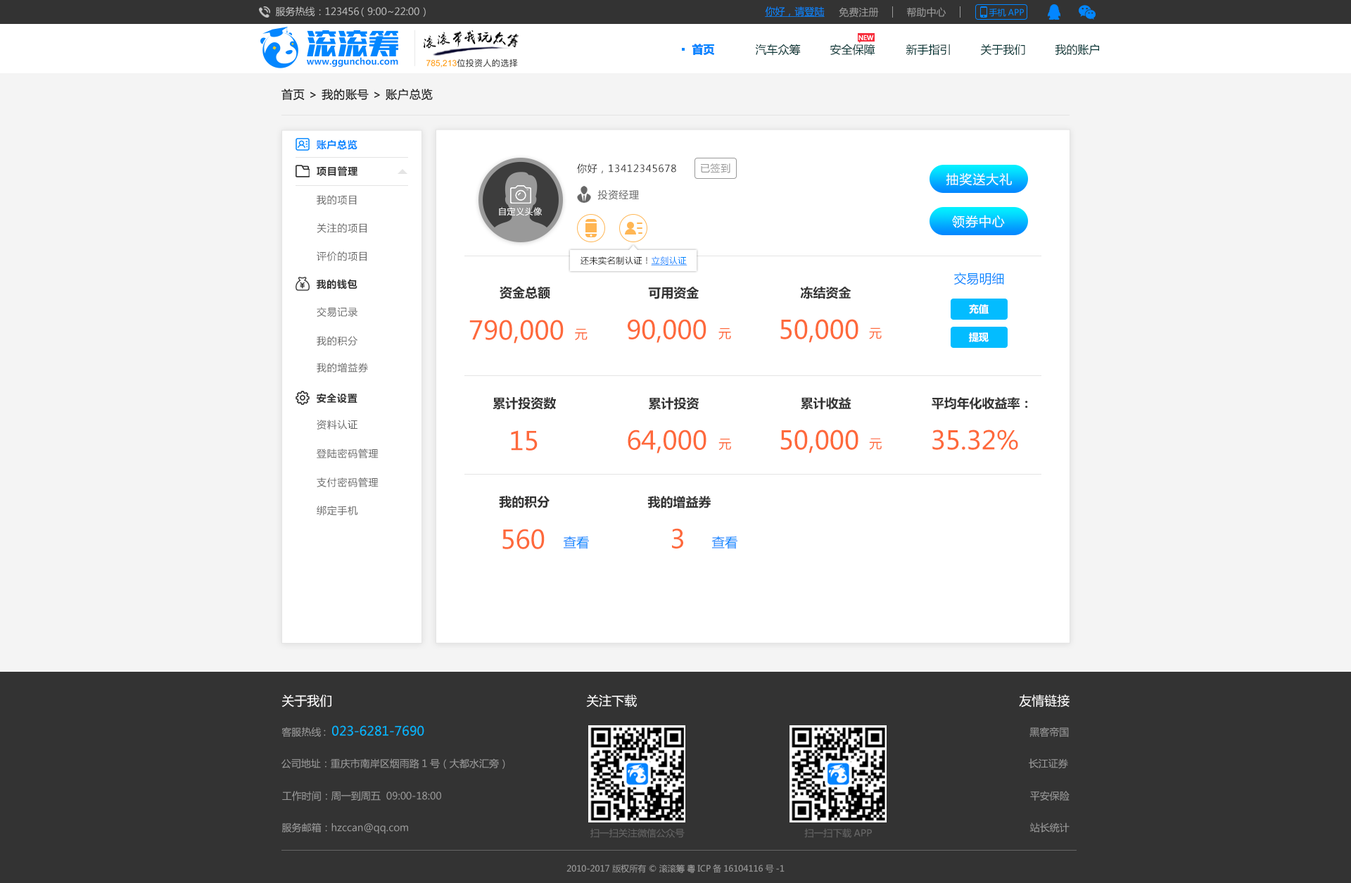
<style>
.page{position:relative;width:1351px;height:883px;background:#ffffff}
.page>*{position:absolute;margin:0}
.t1{font:9.9px "MicrosoftYaHei";color:#c4c4c4}
.t2{font:9.9px "MicrosoftYaHei";color:#0386ff;text-decoration:underline}
.t3{font:9.9px "MicrosoftYaHei";color:#999999}
.t4{font:8.4px "MicrosoftYaHei";color:#0386ff}
.t5{font:6.3px "MicrosoftYaHei";color:#ffffff}
.t6{font:11.3px "MicrosoftYaHei-Bold";color:#0386ff}
.t7{font:11.3px "MicrosoftYaHei";color:#033333}
.t8{font:8.8px "MicrosoftYaHei-Bold";color:#0386ff}
.t9{font:11.3px "MicrosoftYaHei";letter-spacing:0.05em;color:#333333}
.t10{font:9.9px "MicrosoftYaHei-Bold";letter-spacing:0.05em;color:#0386ff}
.t11{font:9.9px "MicrosoftYaHei-Bold";letter-spacing:0.05em;color:#333333}
.t12{font:9.9px "MicrosoftYaHei";letter-spacing:0.05em;color:#333333}
.t13{font:9.9px "MicrosoftYaHei";letter-spacing:0.05em;color:#999999}
.t14{font:12.7px "MicrosoftYaHei";letter-spacing:0.05em;color:#ffffff}
.t15{font:9.9px "MicrosoftYaHei";letter-spacing:0.05em;color:#666666}
.t16{font:8.4px "MicrosoftYaHei";letter-spacing:0.05em;color:#ffffff}
.t17{font:8.4px "MicrosoftYaHei";letter-spacing:0.05em;color:#222222}
.t18{font:8.4px "MicrosoftYaHei";letter-spacing:0.05em;color:#0386ff;text-decoration:underline}
.t19{font:12.6px "MicrosoftYaHei";color:#0386ff}
.t20{font:12.6px "MicrosoftYaHei-Bold";color:#333333}
.t21{font:9.9px "MicrosoftYaHei-Bold";color:#ffffff}
.t22{font:25.3px "MicrosoftYaHei";color:#fe693b}
.t23{font:12.6px "MicrosoftYaHei";color:#fe693b}
.t24{font:13.1px "MicrosoftYaHei";color:#0386ff}
.t25{font:12.7px "MicrosoftYaHei";color:#fffefe}
.t26{font:12.7px "MicrosoftYaHei";color:#03b6ff}
.t27{font:9.4px "MicrosoftYaHei";color:#666666}
.t28{font:8.4px "MicrosoftYaHei";color:#999999}
</style>
<div class="page">
<p class="t1" style="left:275px;top:6px;width:151px;height:11px">服务热线：123456 （9:00~22:00）</p>
<p class="t2" style="left:765px;top:6px;width:60px;height:11px">你好，请登陆</p>
<p class="t3" style="left:839px;top:7px;width:40px;height:11px">免费注册</p>
<p class="t3" style="left:907px;top:7px;width:40px;height:11px">帮助中心</p>
<p class="t4" style="left:989px;top:8px;width:35px;height:9px">手机APP</p>
<p class="t5" style="left:859px;top:34px;width:15px;height:6px">NEW</p>
<p class="t6" style="left:692px;top:44px;width:23px;height:12px">首页</p>
<p class="t7" style="left:755px;top:44px;width:46px;height:12px">汽车众筹</p>
<p class="t7" style="left:830px;top:44px;width:45px;height:12px">安全保障</p>
<p class="t7" style="left:906px;top:44px;width:44px;height:12px">新手指引</p>
<p class="t7" style="left:980px;top:44px;width:45px;height:12px">关于我们</p>
<p class="t7" style="left:1055px;top:44px;width:44px;height:12px">我的账户</p>
<p class="t8" style="left:307px;top:57px;width:91px;height:10px">www.ggunchou.com</p>
<p class="t9" style="left:281px;top:89px;width:152px;height:12px">首页 &gt; 我的账号 &gt; 账户总览</p>
<p class="t10" style="left:317px;top:139px;width:41px;height:11px">账户总览</p>
<p class="t11" style="left:317px;top:166px;width:41px;height:10px">项目管理</p>
<p class="t12" style="left:577px;top:163px;width:99px;height:11px">你好，13412345678</p>
<p class="t13" style="left:701px;top:163px;width:29px;height:10px">已签到</p>
<p class="t14" style="left:946px;top:173px;width:66px;height:13px">抽奖送大礼</p>
<p class="t15" style="left:317px;top:195px;width:40px;height:10px">我的项目</p>
<p class="t15" style="left:597px;top:189px;width:42px;height:11px">投资经理</p>
<p class="t16" style="left:499px;top:207px;width:43px;height:9px">自定义头像</p>
<p class="t14" style="left:952px;top:215px;width:53px;height:13px">领券中心</p>
<p class="t15" style="left:317px;top:223px;width:50px;height:10px">关注的项目</p>
<p class="t15" style="left:317px;top:251px;width:50px;height:10px">评价的项目</p>
<p class="t17" style="left:581px;top:256px;width:107px;height:9px">还未实名制认证！<span class="t18">立刻认证</span></p>
<p class="t11" style="left:317px;top:279px;width:41px;height:10px">我的钱包</p>
<p class="t19" style="left:954px;top:272px;width:50px;height:13px">交易明细</p>
<p class="t20" style="left:500px;top:286px;width:50px;height:13px">资金总额</p>
<p class="t20" style="left:648px;top:286px;width:51px;height:13px">可用资金</p>
<p class="t20" style="left:800px;top:286px;width:52px;height:13px">冻结资金</p>
<p class="t21" style="left:969px;top:304px;width:20px;height:10px">充值</p>
<p class="t15" style="left:317px;top:307px;width:41px;height:10px">交易记录</p>
<p class="t22" style="left:469px;top:320px;width:95px;height:23px">790,000</p>
<p class="t23" style="left:575px;top:329px;width:13px;height:11px">元</p>
<p class="t22" style="left:628px;top:319px;width:79px;height:24px">90,000</p>
<p class="t23" style="left:719px;top:328px;width:12px;height:11px">元</p>
<p class="t22" style="left:780px;top:319px;width:79px;height:24px">50,000</p>
<p class="t23" style="left:869px;top:327px;width:13px;height:12px">元</p>
<p class="t15" style="left:317px;top:336px;width:41px;height:10px">我的积分</p>
<p class="t21" style="left:969px;top:332px;width:20px;height:10px">提现</p>
<p class="t15" style="left:317px;top:362px;width:51px;height:10px">我的增益券</p>
<p class="t11" style="left:317px;top:393px;width:41px;height:10px">安全设置</p>
<p class="t20" style="left:493px;top:397px;width:63px;height:13px">累计投资数</p>
<p class="t20" style="left:648px;top:397px;width:52px;height:13px">累计投资</p>
<p class="t20" style="left:801px;top:397px;width:51px;height:13px">累计收益</p>
<p class="t20" style="left:932px;top:397px;width:96px;height:13px">平均年化收益率：</p>
<p class="t15" style="left:317px;top:419px;width:41px;height:10px">资料认证</p>
<p class="t22" style="left:511px;top:430px;width:27px;height:20px">15</p>
<p class="t22" style="left:628px;top:429px;width:79px;height:24px">64,000</p>
<p class="t22" style="left:780px;top:429px;width:79px;height:24px">50,000</p>
<p class="t23" style="left:869px;top:438px;width:13px;height:12px">元</p>
<p class="t22" style="left:932px;top:429px;width:86px;height:21px">35.32%</p>
<p class="t15" style="left:317px;top:448px;width:62px;height:10px">登陆密码管理</p>
<p class="t23" style="left:719px;top:438px;width:12px;height:12px">元</p>
<p class="t15" style="left:317px;top:477px;width:62px;height:10px">支付密码管理</p>
<p class="t20" style="left:499px;top:495px;width:51px;height:13px">我的积分</p>
<p class="t20" style="left:647px;top:495px;width:64px;height:13px">我的增益券</p>
<p class="t15" style="left:317px;top:505px;width:41px;height:10px">绑定手机</p>
<p class="t22" style="left:502px;top:529px;width:43px;height:20px">560</p>
<p class="t22" style="left:672px;top:528px;width:11px;height:20px">3</p>
<p class="t24" style="left:563px;top:536px;width:26px;height:13px">查看</p>
<p class="t24" style="left:711px;top:536px;width:27px;height:13px">查看</p>
<p class="t25" style="left:281px;top:694px;width:50px;height:13px">关于我们</p>
<p class="t25" style="left:586px;top:694px;width:51px;height:13px">关注下载</p>
<p class="t25" style="left:1019px;top:694px;width:51px;height:13px">友情链接</p>
<p class="t26" style="left:281px;top:725px;width:143px;height:12px"><span class="t3">客服热线:  </span>023-6281-7690</p>
<p class="t3" style="left:1030px;top:726px;width:39px;height:11px">黑客帝国</p>
<p class="t3" style="left:281px;top:758px;width:224px;height:10px">公司地址：重庆市南岸区烟雨路1号（大都水汇旁）</p>
<p class="t3" style="left:1029px;top:758px;width:39px;height:10px">长江证券</p>
<p class="t3" style="left:282px;top:790px;width:159px;height:11px">工作时间：周一到周五  09:00-18:00</p>
<p class="t3" style="left:1030px;top:790px;width:40px;height:10px">平安保险</p>
<p class="t3" style="left:281px;top:822px;width:127px;height:11px">服务邮箱：hzccan@qq.com</p>
<p class="t3" style="left:1030px;top:822px;width:40px;height:10px">站长统计</p>
<p class="t27" style="left:590px;top:828px;width:95px;height:9px">扫一扫关注微信公众号</p>
<p class="t27" style="left:804px;top:828px;width:68px;height:9px">扫一扫下载APP</p>
<p class="t28" style="left:567px;top:863px;width:218px;height:10px">2010-2017 版权所有 © 滚滚筹 粤ICP备16104116号-1</p>
</div>
